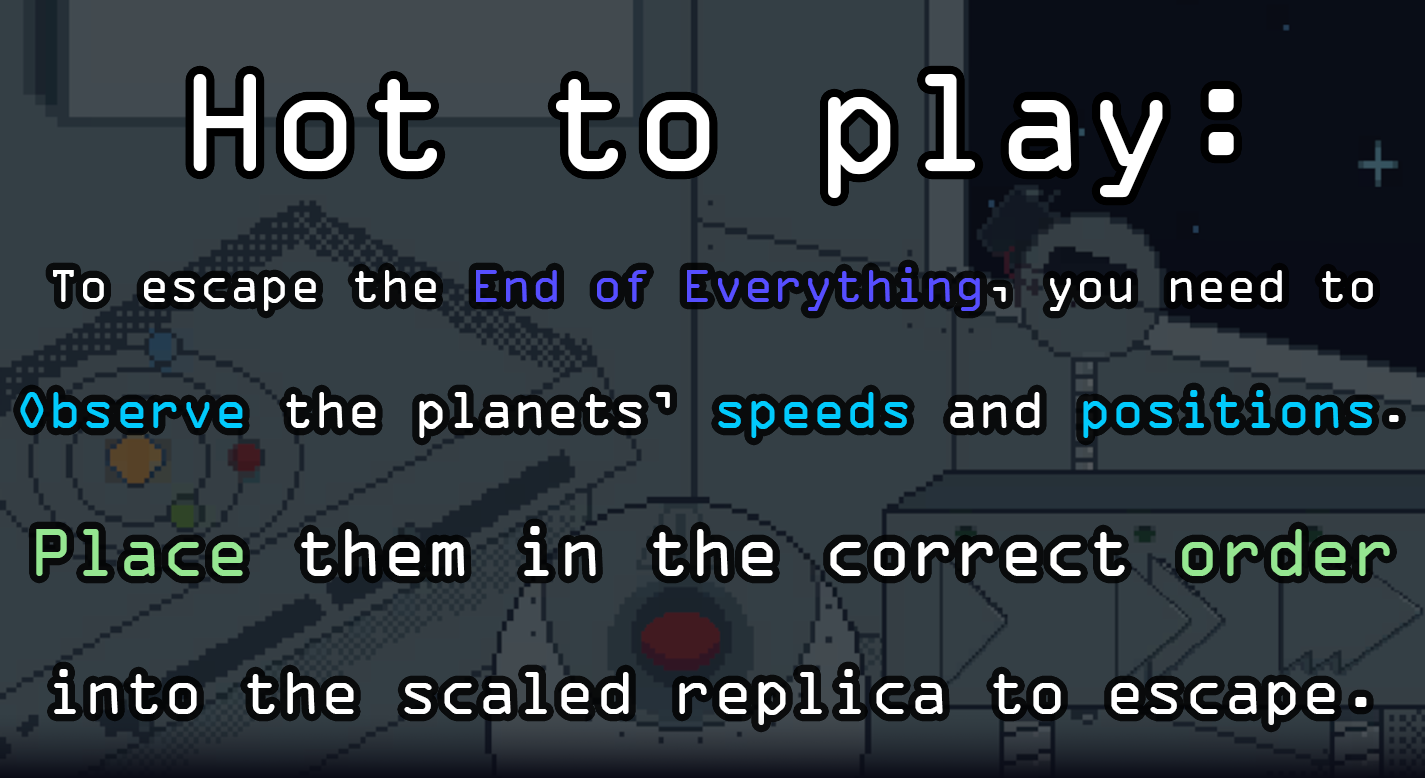
<style>
.page{position:relative;width:1425px;height:778px;background:#343f45}
.page>*{position:absolute;margin:0}
.t1{font:150px "OCRAExtended";color:#ffffff}
.t2{font:65px "OCRAExtended";color:#ffffff}
.t3{font:50px "OCRAExtended";color:#ffffff}
.t4{font:50px "OCRAExtended";color:#564eff}
.t5{font:55px "OCRAExtended";color:#01cafc}
.t6{font:55px "OCRAExtended";color:#ffffff}
.t7{font:73px "OCRAExtended";color:#95e691}
.t8{font:73px "OCRAExtended";color:#ffffff}
</style>
<div class="page">
<p class="t1" style="left:193px;top:74px;width:1041px;height:124px">Hot to play:</p>
<p class="t2" style="left:20px;top:267px;width:1379px;height:458px;text-align:center"><span class="t3">To escape the </span><span class="t4">End of Everything</span><span class="t3">, you need to<br><br></span><span class="t5">Observe </span><span class="t6">the planets’ </span><span class="t5">speeds </span><span class="t6">and </span><span class="t5">positions</span><span class="t6">.<br><br></span><span class="t7">Place </span><span class="t8">them in the correct </span><span class="t7">order<br><br></span>into the scaled replica to escape.</p>
</div>
